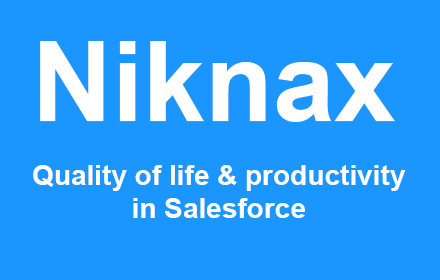
<style>
.page{position:relative;width:440px;height:280px;background:#1b96ff}
.page>*{position:absolute;margin:0}
.t1{font:111px "Arial-BoldMT";color:#ffffff}
.t2{font:28px "Arial-BoldMT";color:#ffffff}
</style>
<div class="page">
<p class="t1" style="left:40px;top:41px;width:355px;height:81px">Niknax</p>
<p class="t2" style="left:33px;top:165px;width:373px;height:53px;text-align:center">Quality of life &amp; productivity<br>in Salesforce</p>
</div>
